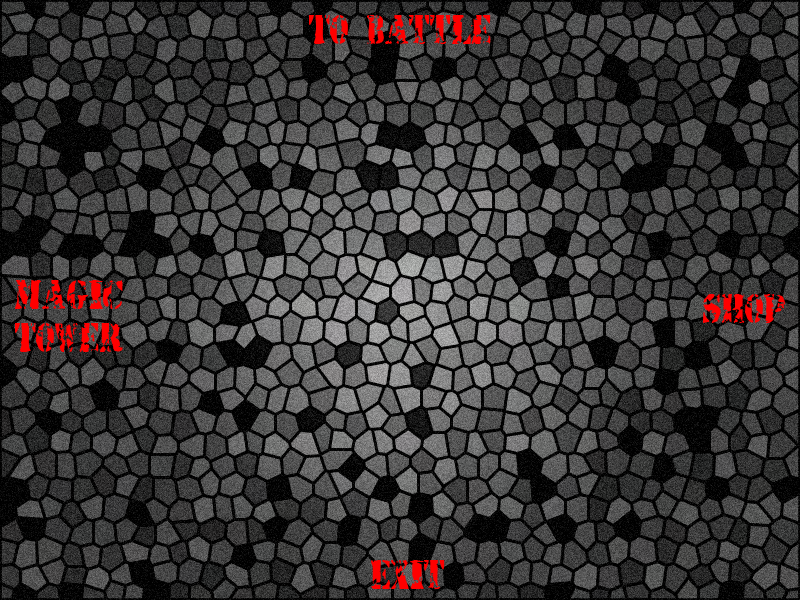
<style>
.page{position:relative;width:800px;height:600px}
.page>*{position:absolute;margin:0}
.t1{font:36px "4YEOstamp";color:#ff0000}
</style>
<div class="page">
<p class="t1" style="left:309px;top:15px;width:182px;height:29px">To Battle</p>
<p class="t1" style="left:15px;top:280px;width:108px;height:72px">Magic<br>Tower</p>
<p class="t1" style="left:703px;top:294px;width:82px;height:29px">Shop</p>
<p class="t1" style="left:371px;top:560px;width:74px;height:29px">Exit</p>
</div>
